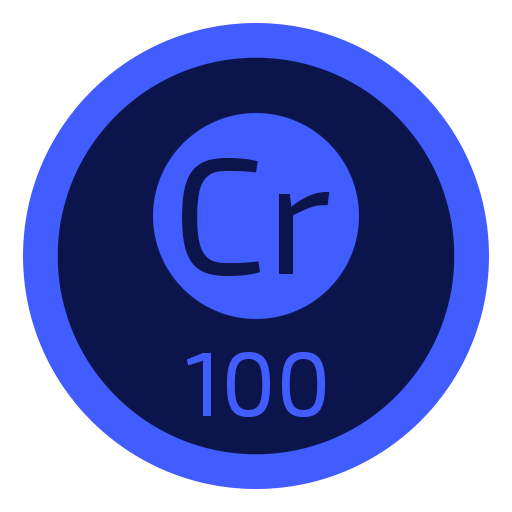
<style>
.page{position:relative;width:512px;height:512px;background:#ffffff}
.page>*{position:absolute;margin:0}
.t1{font:165.1px "Exo2-Regular";color:#0c154b}
.t2{font:90.9px "Exo2-Regular";color:#425dff}
</style>
<div class="page">
<p class="t1" style="left:182px;top:157px;width:148px;height:120px">Cr</p>
<p class="t2" style="left:187px;top:352px;width:138px;height:65px">100</p>
</div>
